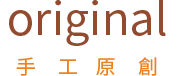
<style>
.page{position:relative;width:186px;height:76px;background:#ffffff}
.page>*{position:absolute;margin:0}
.t1{font:45px "NotoSansCJKtc-Regular";color:#924b2e}
.t2{font:20px "NotoSansCJKtc-Regular";color:#eb811f}
</style>
<div class="page">
<p class="t1" style="left:9px;top:0px;width:157px;height:46px">original</p>
<p class="t2" style="left:16px;top:57px;width:141px;height:19px">手     工    原     創</p>
</div>
